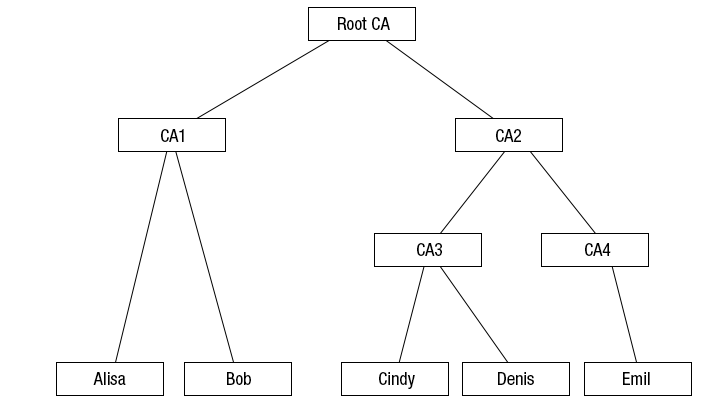
<style>
.page{position:relative;width:727px;height:402px;background:#ffffff}
.page>*{position:absolute;margin:0}
.t1{font:18px "HelveticaNeueLTStd-Cn";color:#000000}
</style>
<div class="page">
<p class="t1" style="left:338px;top:17px;width:52px;height:13px">Root CA</p>
<p class="t1" style="left:161px;top:129px;width:23px;height:13px">CA1</p>
<p class="t1" style="left:496px;top:129px;width:25px;height:13px">CA2</p>
<p class="t1" style="left:417px;top:243px;width:25px;height:13px">CA3</p>
<p class="t1" style="left:585px;top:243px;width:26px;height:13px">CA4</p>
<p class="t1" style="left:93px;top:372px;width:33px;height:13px">Alisa</p>
<p class="t1" style="left:227px;top:372px;width:24px;height:13px">Bob</p>
<p class="t1" style="left:379px;top:372px;width:36px;height:17px">Cindy</p>
<p class="t1" style="left:498px;top:372px;width:36px;height:13px">Denis</p>
<p class="t1" style="left:623px;top:372px;width:27px;height:13px">Emil</p>
</div>
